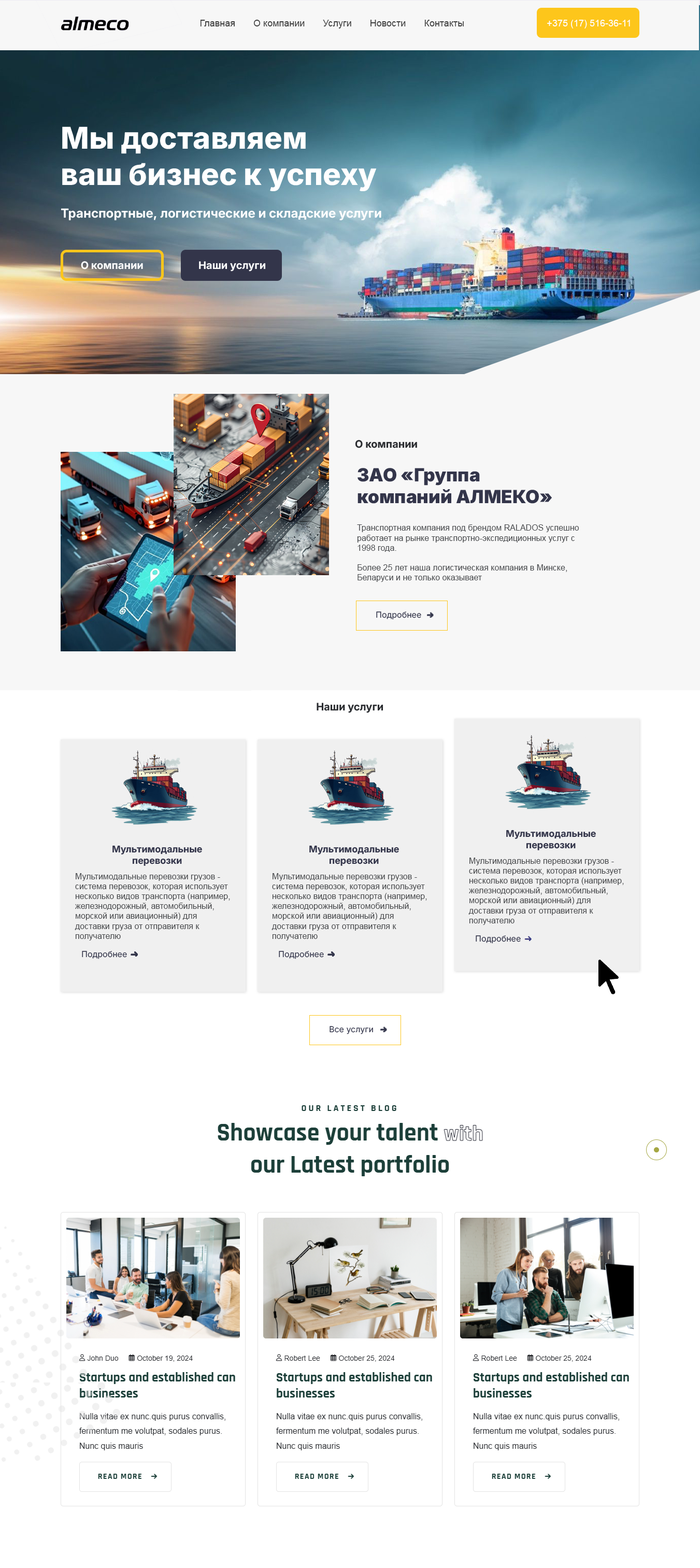
<style>
.page{position:relative;width:700px;height:1568px;background:#ffffff}
.page>*{position:absolute;margin:0}
.t1{font:9.3px "ArialMT";color:#404040}
.t2{font:9.3px "ArialMT";color:#ffffff}
.t3{font:30.1px "Inter-ExtraBold";color:#ffffff}
.t4{font:12.4px "Inter-Bold";color:#ffffff}
.t5{font:10.4px "Inter-Bold";color:#ffffff}
.t6{font:10.4px "Inter-Bold";color:#2a2c30}
.t7{font:18.1px "Inter-Black";color:#33354a}
.t8{font:8.3px "ArialMT";color:#47494c}
.t9{font:8.3px "Inter-Regular";color:#33354a}
.t10{font:9.3px "Inter-Bold";color:#33354a}
</style>
<div class="page">
<p class="t1" style="left:200px;top:20px;width:264px;height:8px">Главная       О компании       Услуги       Новости       Контакты</p>
<p class="t2" style="left:547px;top:20px;width:83px;height:8px">+375 (17) 516-36-11</p>
<p class="t3" style="left:62px;top:126px;width:315px;height:65px">Мы доставляем<br>ваш бизнес к успеху</p>
<p class="t4" style="left:61px;top:208px;width:320px;height:13px">Транспортные, логистические и складские услуги</p>
<p class="t5" style="left:81px;top:261px;width:62px;height:8px">О компании</p>
<p class="t5" style="left:199px;top:261px;width:67px;height:11px">Наши услуги</p>
<p class="t6" style="left:355px;top:440px;width:62px;height:8px">О компании</p>
<p class="t7" style="left:358px;top:468px;width:194px;height:36px">ЗАО «Группа<br>компаний АЛМЕКО»</p>
<p class="t8" style="left:357px;top:524px;width:222px;height:58px">Транспортная компания под брендом RALADOS успешно работает на рынке транспортно-экспедиционных услуг с 1998 года.<br><br>Более 25 лет наша логистическая компания в Минске, Беларуси и не только оказывает транспортно-экспедиционные услуги.</p>
<p class="t9" style="left:376px;top:611px;width:45px;height:9px">Подробнее</p>
<p class="t6" style="left:317px;top:703px;width:66px;height:10px">Наши услуги</p>
<p class="t10" style="left:506px;top:830px;width:90px;height:20px;text-align:center">Мультимодальные<br>перевозки</p>
<p class="t10" style="left:112px;top:845px;width:90px;height:21px;text-align:center">Мультимодальные<br>перевозки</p>
<p class="t10" style="left:309px;top:845px;width:90px;height:21px;text-align:center">Мультимодальные<br>перевозки</p>
<p class="t8" style="left:468px;top:858px;width:156px;height:67px">Мультимодальные перевозки грузов - система перевозок, которая использует несколько видов транспорта (например, железнодорожный, автомобильный, морской или авиационный) для доставки груза от отправителя к получателю</p>
<p class="t8" style="left:75px;top:873px;width:155px;height:67px">Мультимодальные перевозки грузов - система перевозок, которая использует несколько видов транспорта (например, железнодорожный, автомобильный, морской или авиационный) для доставки груза от отправителя к получателю</p>
<p class="t8" style="left:272px;top:873px;width:155px;height:67px">Мультимодальные перевозки грузов - система перевозок, которая использует несколько видов транспорта (например, железнодорожный, автомобильный, морской или авиационный) для доставки груза от отправителя к получателю</p>
<p class="t9" style="left:476px;top:935px;width:45px;height:9px">Подробнее</p>
<p class="t9" style="left:82px;top:951px;width:45px;height:8px">Подробнее</p>
<p class="t9" style="left:279px;top:951px;width:45px;height:8px">Подробнее</p>
<p class="t9" style="left:330px;top:1026px;width:43px;height:8px">Все услуги</p>
</div>
